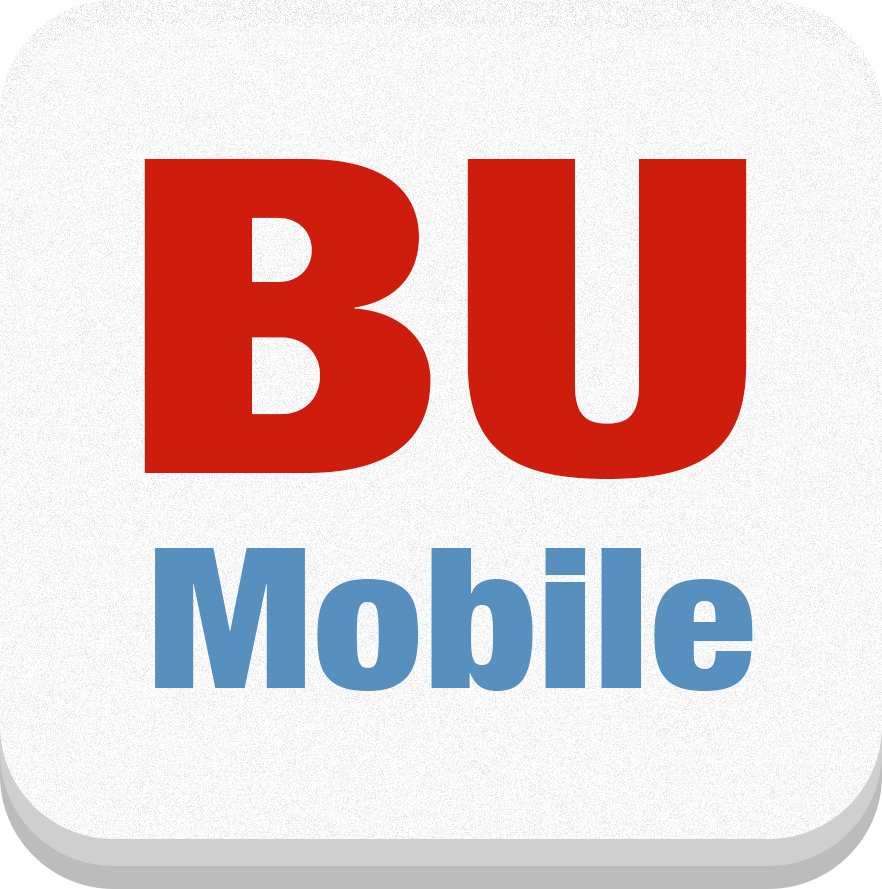
<style>
.page{position:relative;width:882px;height:889px;background:#fefefe}
.page>*{position:absolute;margin:0}
.t1{font:439.7px "HelveticaNeueLT-BlackCond";color:#ce1d0d;scale:1.31 1}
.t2{font:195.5px "HelveticaNeueLTCom-BlkCn";color:#5790be;scale:1.12 1}
</style>
<div class="page">
<p class="t1" style="left:144px;top:158px;width:603px;height:322px">BU</p>
<p class="t2" style="left:155px;top:548px;width:598px;height:143px">Mobile</p>
</div>
